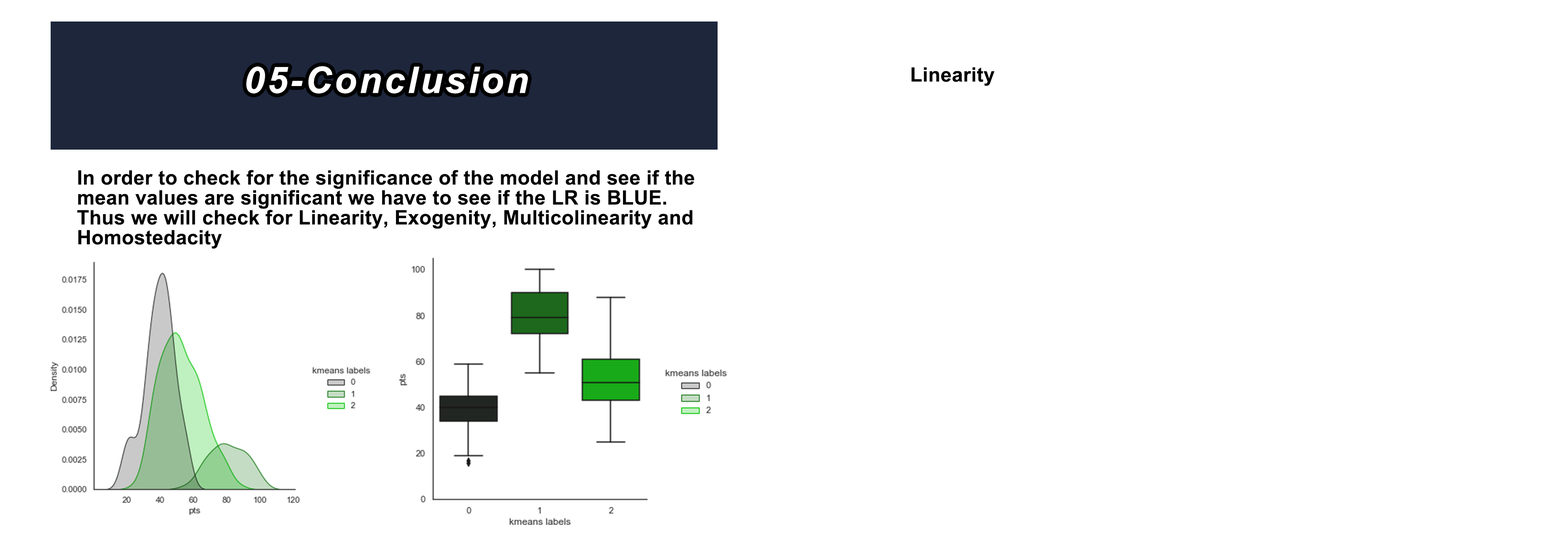
<style>
.page{position:relative;width:1568px;height:554px;background:#ffffff}
.page>*{position:absolute;margin:0}
.t1{font:36.5px "Arial-BoldItalicMT";letter-spacing:0.075em;color:#ffffff}
.t2{font:19.9px "Arial-BoldMT";letter-spacing:0.01em;color:#000000}
.t3{font:19.9px/19.9px "Arial-BoldMT";letter-spacing:0.01em;color:#000000}
</style>
<div class="page">
<p class="t1" style="left:246px;top:66px;width:282px;height:28px">05-Conclusion</p>
<p class="t2" style="left:912px;top:67px;width:83px;height:19px">Linearity</p>
<p class="t3" style="left:77px;top:170px;width:617px;height:78px">In order to check for the significance of the model and see if the mean values are significant we have to see if the LR is BLUE. <br>Thus we will check for Linearity, Exogenity, Multicolinearity and   Homostedacity</p>
</div>
